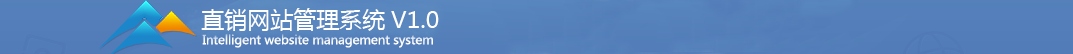
<style>
.page{position:relative;width:1073px;height:54px}
.page>*{position:absolute;margin:0}
.t1{font:23px "MicrosoftYaHei";color:#ffffff}
</style>
<div class="page">
<p class="t1" style="left:201px;top:8px;width:238px;height:23px">直销网站管理系统V1.0</p>
</div>
